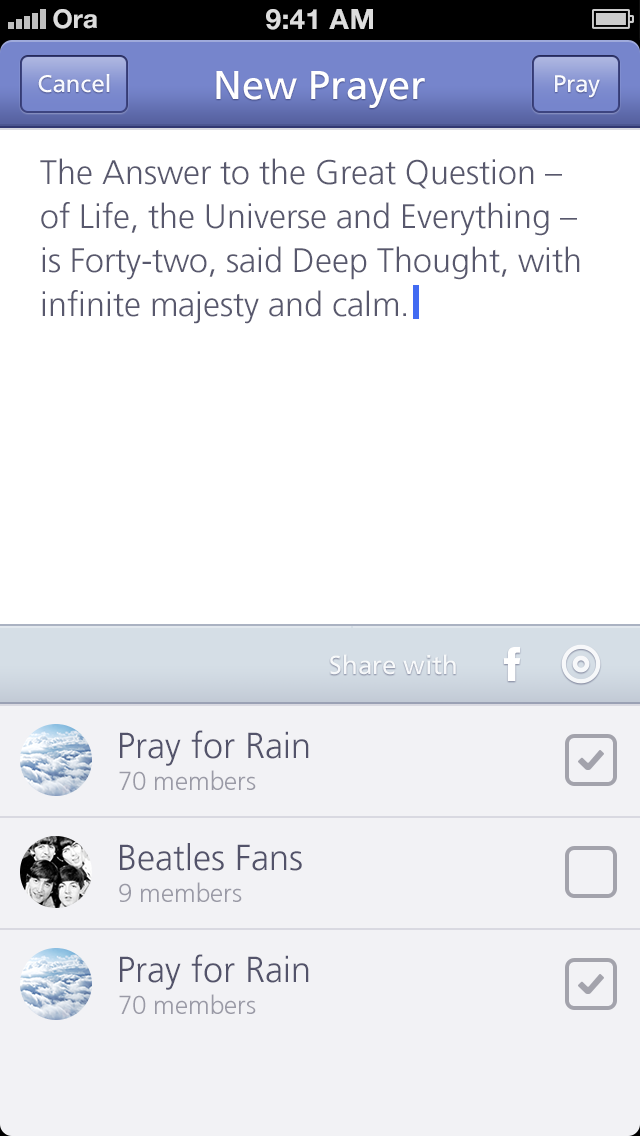
<style>
.page{position:relative;width:640px;height:1136px;background:#ffffff}
.page>*{position:absolute;margin:0}
.t1{font:24px "FrutigerLT-Roman";color:#f2f5ff}
.t2{font:40px "FrutigerLT-Roman";color:#ffffff}
.t3{font:34px/44px "FrutigerLT-Light";color:#58586d}
.t4{font:26px "FrutigerLT-Roman";color:#ffffff}
.t5{font:36px "FrutigerLT-Light";color:#53536a}
.t6{font:26px "FrutigerCE-Light";color:#9a9aa6}
</style>
<div class="page">
<p class="t1" style="left:38px;top:74px;width:72px;height:19px">Cancel</p>
<p class="t2" style="left:216px;top:71px;width:209px;height:37px">New Prayer</p>
<p class="t1" style="left:555px;top:75px;width:45px;height:23px">Pray</p>
<p class="t3" style="left:40px;top:158px;width:540px;height:166px">The Answer to the Great Question – of Life, the Universe and Everything – is Forty-two, said Deep Thought, with infinite majesty and calm.</p>
<p class="t4" style="left:330px;top:654px;width:126px;height:21px">Share with</p>
<p class="t5" style="left:120px;top:730px;width:189px;height:36px">Pray for Rain</p>
<p class="t6" style="left:119px;top:770px;width:137px;height:20px">70 members</p>
<p class="t5" style="left:120px;top:843px;width:182px;height:28px">Beatles Fans</p>
<p class="t6" style="left:119px;top:882px;width:123px;height:20px">9 members</p>
<p class="t5" style="left:120px;top:954px;width:189px;height:36px">Pray for Rain</p>
<p class="t6" style="left:119px;top:994px;width:137px;height:20px">70 members</p>
</div>
